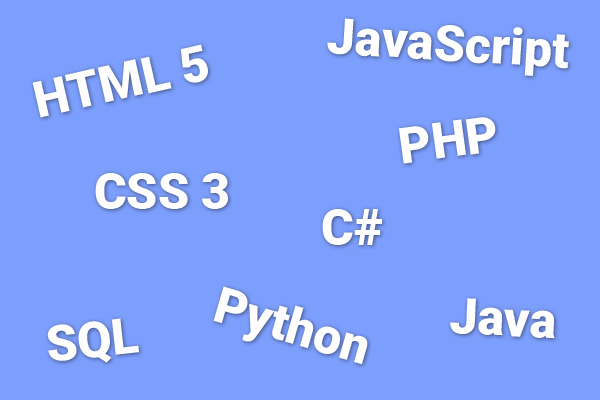
<style>
.page{position:relative;width:600px;height:400px;background:#7c9efc}
.page>*{position:absolute;margin:0}
.t1{font:50px "Roboto-Black";color:#fefefe}
</style>
<div class="page">
<p class="t1" style="left:327px;top:18px;width:242px;height:58px;rotate:4deg">JavaScript</p>
<p class="t1" style="left:32px;top:44px;width:176px;height:74px;rotate:-13deg">HTML 5</p>
<p class="t1" style="left:398px;top:117px;width:98px;height:47px;rotate:-8deg">PHP</p>
<p class="t1" style="left:95px;top:173px;width:133px;height:36px">CSS 3</p>
<p class="t1" style="left:322px;top:209px;width:60px;height:36px">C#</p>
<p class="t1" style="left:213px;top:286px;width:155px;height:79px;rotate:16deg">Python</p>
<p class="t1" style="left:450px;top:298px;width:105px;height:41px;rotate:3deg">Java</p>
<p class="t1" style="left:47px;top:318px;width:92px;height:45px;rotate:-6deg">SQL</p>
</div>
